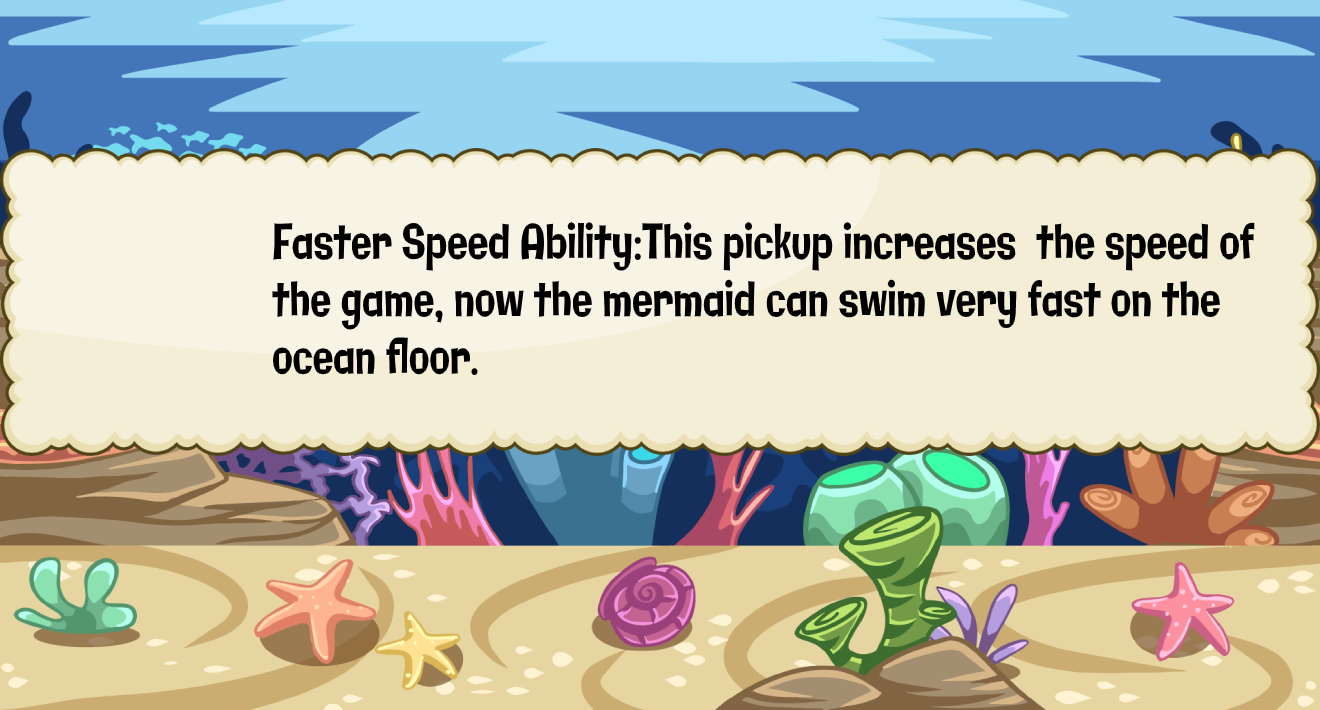
<style>
.page{position:relative;width:1320px;height:710px;background:#f4eed7}
.page>*{position:absolute;margin:0}
.t1{font:47.9px "Galindo-Regular";color:#000000;scale:0.71 1}
</style>
<div class="page">
<p class="t1" style="left:272px;top:222px;width:983px;height:153px">Faster Speed Ability:This pickup increases  the speed of  <br>the game, now the mermaid can swim very fast on the <br>ocean floor.</p>
</div>
